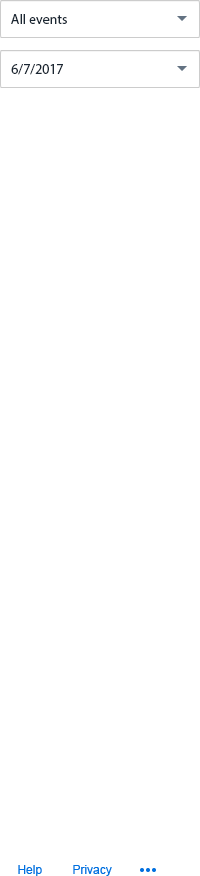
<style>
.page{position:relative;width:200px;height:876px;background:#ffffff}
.page>*{position:absolute;margin:0}
.t1{font:14px "MyriadPro-Regular";color:#1b2733}
.t2{font:12px "ArialMT";color:#0070e0}
</style>
<div class="page">
<p class="t1" style="left:11px;top:14px;width:56px;height:10px">All events</p>
<p class="t1" style="left:11px;top:64px;width:52px;height:11px">6/7/2017</p>
<p class="t2" style="left:18px;top:865px;width:24px;height:11px">Help</p>
<p class="t2" style="left:73px;top:865px;width:39px;height:11px">Privacy</p>
</div>
